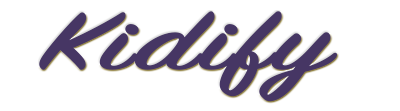
<style>
.page{position:relative;width:400px;height:111px;background:#ffffff}
.page>*{position:absolute;margin:0}
.t1{font:88.8px "SignPainter-HouseScript";color:#463664;font-weight:bold;scale:1.7 1}
</style>
<div class="page">
<p class="t1" style="left:39px;top:11px;width:299px;height:91px">Kidify</p>
</div>
